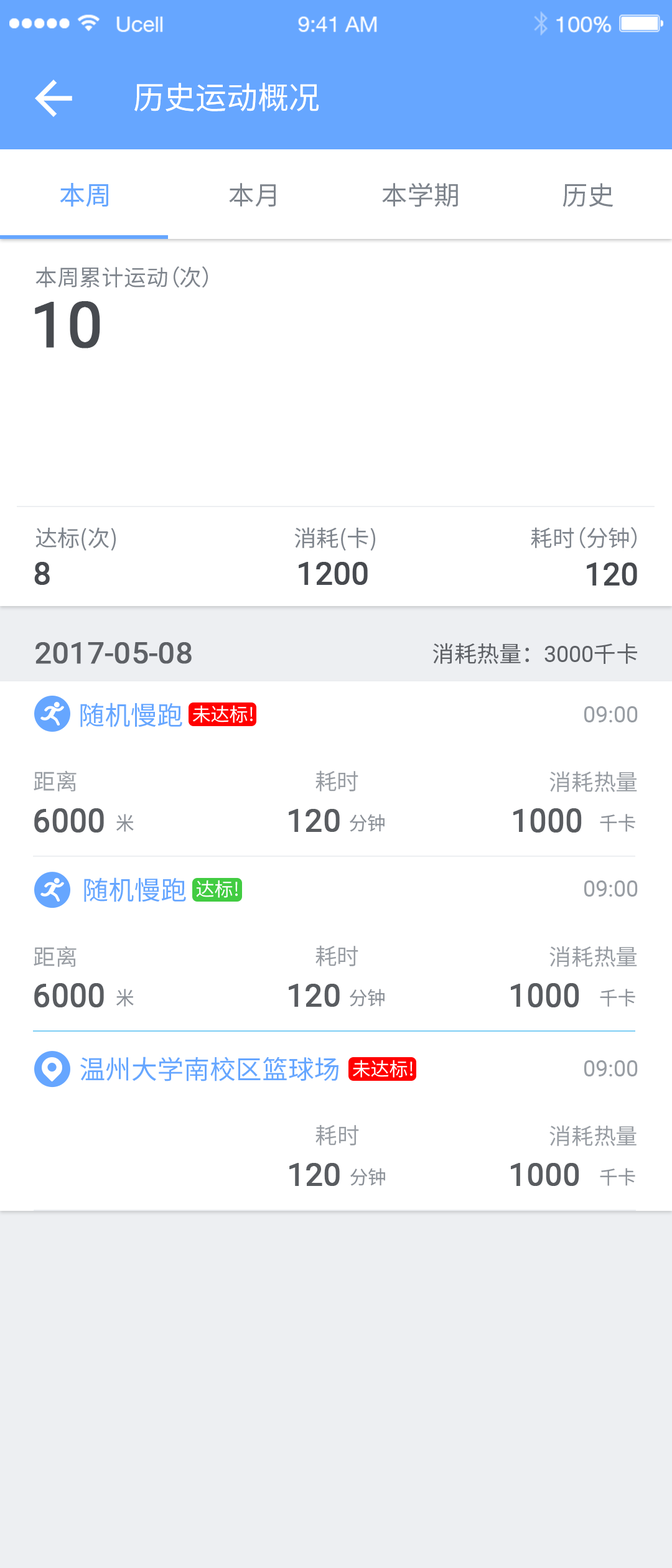
<style>
.page{position:relative;width:672px;height:1568px;background:#ffffff}
.page>*{position:absolute;margin:0}
.t1{font:31.1px "NotoSansHans-Regular";color:#ffffff}
.t2{font:26.1px "NotoSansHans-Regular";color:#66a6ff}
.t3{font:26.1px "NotoSansHans-Regular";color:#7e848c}
.t4{font:22.4px "NotoSansHans-Regular";color:#7e848c}
.t5{font:62.6px "Roboto-Regular";color:#474a4f;font-weight:bold}
.t6{font:31.3px "Roboto-Regular";color:#474a4f;font-weight:bold}
.t7{font:31.2px "Roboto-Regular";color:#474a4f;font-weight:bold}
.t8{font:31.4px "Roboto-Regular";color:#474a4f;font-weight:bold}
.t9{font:29.9px "Roboto-Regular";color:#5e6166;font-weight:bold}
.t10{font:22.4px "NotoSansHans-Regular";color:#5e6166}
.t11{font:22.4px "Roboto-Regular";color:#5e6166}
.t12{font:18.6px "NotoSansHans-Regular";color:#ffffff}
.t13{font:22.4px "Roboto-Regular";color:#989da3}
.t14{font:22.4px "NotoSansHans-Regular";color:#989da3}
.t15{font:22.3px "NotoSansHans-Regular";color:#989da3}
.t16{font:31.5px "Roboto-Regular";color:#474a4f;font-weight:bold}
.t17{font:31.1px "Roboto-Regular";color:#474a4f;font-weight:bold}
.t18{font:19px "NotoSansHans-Regular";color:#7e848c}
.t19{font:18.8px "NotoSansHans-Regular";color:#7e848c}
.t20{font:22.2px "NotoSansHans-Regular";color:#989da3}
.t21{font:18.9px "NotoSansHans-Regular";color:#7e848c}
</style>
<div class="page">
<p class="t1" style="left:134px;top:83px;width:185px;height:29px">历史运动概况</p>
<p class="t2" style="left:60px;top:183px;width:48px;height:24px">本周</p>
<p class="t3" style="left:229px;top:183px;width:47px;height:24px">本月</p>
<p class="t3" style="left:382px;top:182px;width:76px;height:25px">本学期</p>
<p class="t3" style="left:562px;top:183px;width:52px;height:24px">历史</p>
<p class="t4" style="left:35px;top:266px;width:173px;height:22px">本周累计运动（次）</p>
<p class="t5" style="left:35px;top:301px;width:65px;height:47px">10</p>
<p class="t4" style="left:35px;top:527px;width:81px;height:24px">达标(次)</p>
<p class="t4" style="left:294px;top:527px;width:81px;height:24px">消耗(卡)</p>
<p class="t4" style="left:531px;top:527px;width:106px;height:22px">耗时（分钟）</p>
<p class="t6" style="left:34px;top:562px;width:16px;height:23px">8</p>
<p class="t7" style="left:299px;top:562px;width:69px;height:23px">1200</p>
<p class="t8" style="left:587px;top:562px;width:50px;height:24px">120</p>
<p class="t9" style="left:35px;top:642px;width:157px;height:22px">2017-05-08</p>
<p class="t10" style="left:432px;top:643px;width:205px;height:21px">消耗热量：<span class="t11">3000</span>千卡</p>
<p class="t2" style="left:80px;top:702px;width:102px;height:25px">随机慢跑</p>
<p class="t12" style="left:193px;top:705px;width:60px;height:18px">未达标!</p>
<p class="t13" style="left:584px;top:706px;width:54px;height:16px">09:00</p>
<p class="t14" style="left:34px;top:770px;width:43px;height:21px">距离</p>
<p class="t15" style="left:315px;top:770px;width:43px;height:21px">耗时</p>
<p class="t15" style="left:549px;top:771px;width:88px;height:21px">消耗热量</p>
<p class="t16" style="left:34px;top:808px;width:70px;height:25px;opacity:0.9">6000</p>
<p class="t17" style="left:289px;top:809px;width:51px;height:23px;opacity:0.9">120</p>
<p class="t16" style="left:513px;top:808px;width:69px;height:25px;opacity:0.9">1000</p>
<p class="t18" style="left:116px;top:814px;width:18px;height:18px;opacity:0.9">米</p>
<p class="t19" style="left:350px;top:814px;width:35px;height:18px;opacity:0.9">分钟</p>
<p class="t18" style="left:600px;top:814px;width:35px;height:18px;opacity:0.9">千卡</p>
<p class="t2" style="left:84px;top:877px;width:102px;height:25px">随机慢跑</p>
<p class="t12" style="left:196px;top:880px;width:42px;height:18px">达标!</p>
<p class="t13" style="left:584px;top:880px;width:54px;height:17px">09:00</p>
<p class="t14" style="left:34px;top:946px;width:43px;height:21px">距离</p>
<p class="t15" style="left:315px;top:945px;width:43px;height:21px">耗时</p>
<p class="t15" style="left:549px;top:946px;width:88px;height:21px">消耗热量</p>
<p class="t16" style="left:34px;top:983px;width:70px;height:24px;opacity:0.9">6000</p>
<p class="t18" style="left:116px;top:989px;width:18px;height:18px;opacity:0.9">米</p>
<p class="t17" style="left:289px;top:984px;width:51px;height:23px;opacity:0.9">120</p>
<p class="t19" style="left:350px;top:989px;width:35px;height:18px;opacity:0.9">分钟</p>
<p class="t16" style="left:511px;top:983px;width:68px;height:24px;opacity:0.9">1000</p>
<p class="t18" style="left:600px;top:989px;width:35px;height:18px;opacity:0.9">千卡</p>
<p class="t2" style="left:80px;top:1057px;width:258px;height:24px">温州大学南校区篮球场</p>
<p class="t12" style="left:353px;top:1060px;width:60px;height:18px">未达标!</p>
<p class="t13" style="left:584px;top:1060px;width:54px;height:16px">09:00</p>
<p class="t15" style="left:315px;top:1125px;width:44px;height:21px">耗时</p>
<p class="t20" style="left:549px;top:1125px;width:88px;height:21px">消耗热量</p>
<p class="t17" style="left:289px;top:1163px;width:51px;height:23px;opacity:0.9">120</p>
<p class="t19" style="left:350px;top:1168px;width:35px;height:18px;opacity:0.9">分钟</p>
<p class="t6" style="left:511px;top:1163px;width:68px;height:23px;opacity:0.9">1000</p>
<p class="t21" style="left:600px;top:1168px;width:35px;height:18px;opacity:0.9">千卡</p>
</div>
